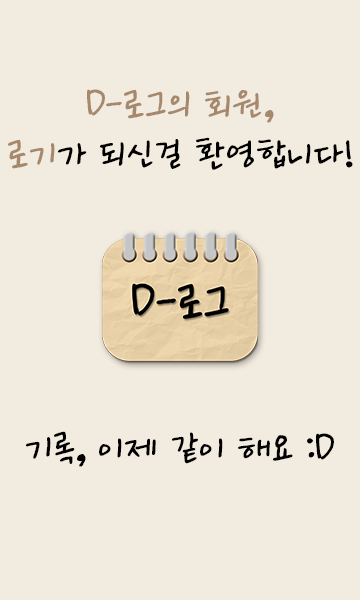
<style>
.page{position:relative;width:360px;height:600px;background:#f2ebdf}
.page>*{position:absolute;margin:0}
.t1{font:40px/50px "Ownglyph_Dailyokja-Rg";color:#a6886d}
.t2{font:40px/50px "Ownglyph_Dailyokja-Rg";color:#000000}
.t3{font:40px "Ownglyph_Dailyokja-Rg";color:#000000}
</style>
<div class="page">
<p class="t1" style="left:8px;top:89px;width:345px;height:81px;text-align:center">D-로그의 회원,<br>로기<span class="t2">가 되신걸 환영합니다!</span></p>
<p class="t3" style="left:26px;top:431px;width:308px;height:36px">기록, 이제 같이 해요 :D</p>
</div>
